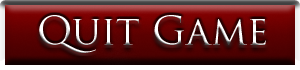
<style>
.page{position:relative;width:300px;height:70px}
.page>*{position:absolute;margin:0}
.t1{font:38.9px "TrajanPro-Regular";color:#ffffff}
</style>
<div class="page">
<p class="t1" style="left:39px;top:15px;width:227px;height:38px">Quit Game</p>
</div>
